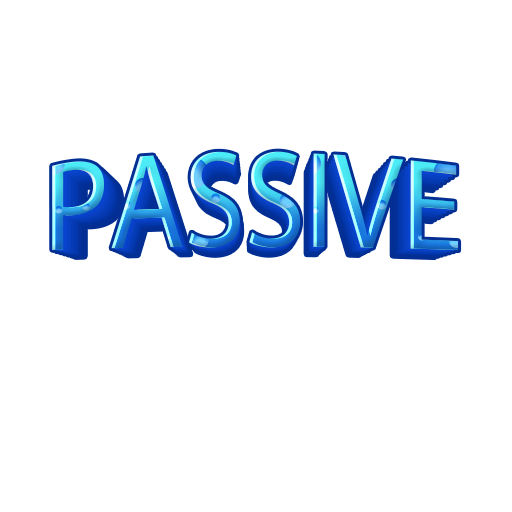
<style>
.page{position:relative;width:512px;height:512px;background:#ffffff}
.page>*{position:absolute;margin:0}
.t1{font:115.3px "MyriadPro-Regular";letter-spacing:-0.01em}
.t2{font:113px "MyriadPro-Regular";letter-spacing:-0.01em}
.t3{font:110.7px "MyriadPro-Regular";letter-spacing:-0.01em}
</style>
<div class="page">
<p class="t1" style="left:67px;top:163px;width:376px;height:92px">PASSIVE</p>
<p class="t2" style="left:71px;top:166px;width:368px;height:90px">PASSIVE</p>
<p class="t3" style="left:75px;top:169px;width:360px;height:89px">PASSIVE</p>
</div>
